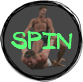
<style>
.page{position:relative;width:83px;height:82px;background:#464646}
.page>*{position:absolute;margin:0}
.t1{font:31.7px "TkachenkoSketch4F-Bold";color:#5dff78}
</style>
<div class="page">
<p class="t1" style="left:11px;top:31px;width:62px;height:19px">SPIN</p>
</div>
